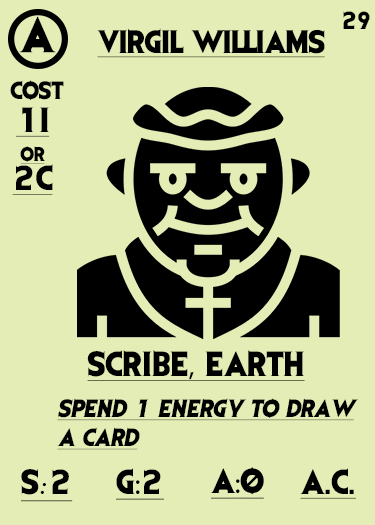
<style>
.page{position:relative;width:375px;height:525px;background:#e3edb5}
.page>*{position:absolute;margin:0}
.t1{font:41.7px "EvilDead";letter-spacing:-0.05em;color:#000000}
.t2{font:20.8px "EvilDead";letter-spacing:-0.1em;color:#000000}
.t3{font:27.1px "EvilDead";letter-spacing:-0.025em;color:#000000;text-decoration:underline}
.t4{font:20.8px "EvilDead";color:#000000}
.t5{font:29.2px/29.2px "EvilDead";color:#000000;text-decoration:underline}
.t6{font:16.7px/29.2px "EvilDead";color:#000000;text-decoration:underline}
.t7{font:29.2px "EvilDead";color:#000000;text-decoration:underline}
.t8{font:29.2px "MyriadPro-Regular";color:#000000;text-decoration:underline}
.t9{font:20.8px/29.2px "EvilDead";color:#000000;font-style:italic;text-decoration:underline}
.t10{font:29.2px "Fadli-Script";color:#000000;text-decoration:underline}
</style>
<div class="page">
<p class="t1" style="left:19px;top:16px;width:37px;height:37px">A</p>
<p class="t2" style="left:343px;top:11px;width:27px;height:18px">29</p>
<p class="t3" style="left:97px;top:28px;width:228px;height:30px">VIRGIL WILLIAMS</p>
<p class="t4" style="left:10px;top:80px;width:54px;height:20px">COST</p>
<p class="t5" style="left:12px;top:107px;width:41px;height:88px;text-align:center">1I<br><span class="t6">or<br></span>2C</p>
<p class="t7" style="left:87px;top:350px;width:218px;height:31px">SCRIBE<span class="t8">,</span> EARTH</p>
<p class="t9" style="left:57px;top:398px;width:301px;height:52px">Spend 1 energy to draw<br>a card</p>
<p class="t7" style="left:21px;top:469px;width:52px;height:33px">S<span class="t10">:</span>2</p>
<p class="t7" style="left:116px;top:468px;width:49px;height:32px">G<span class="t8">:</span>2</p>
<p class="t7" style="left:210px;top:467px;width:54px;height:32px">A<span class="t8">:</span>0</p>
<p class="t7" style="left:300px;top:468px;width:56px;height:31px">A.C.</p>
</div>
